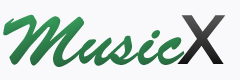
<style>
.page{position:relative;width:240px;height:80px;background:#f9f9fb}
.page>*{position:absolute;margin:0}
.t1{font:70px "BrushScriptStd";color:#2d7b49}
.t2{font:70px "ErasITC-Medium";font-weight:bold}
</style>
<div class="page">
<p class="t1" style="left:3px;top:14px;width:182px;height:53px">Music</p>
<p class="t2" style="left:177px;top:15px;width:49px;height:49px">X</p>
</div>
